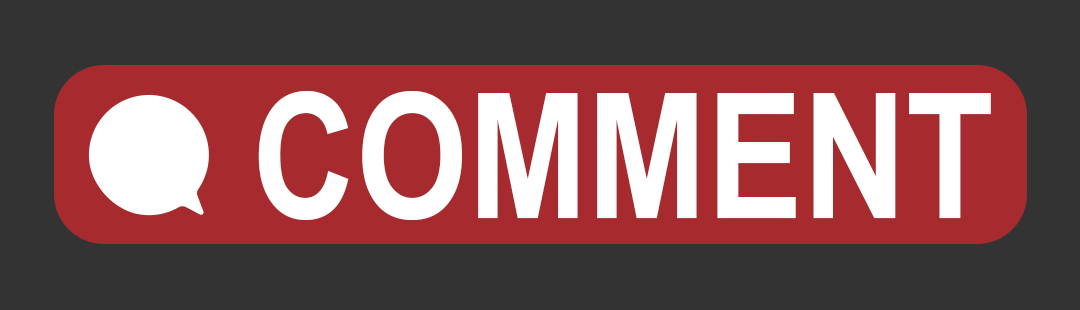
<style>
.page{position:relative;width:1080px;height:310px;background:#333333}
.page>*{position:absolute;margin:0}
.t1{font:175.2px "ArialNarrow-Bold";color:#ffffff;text-transform:uppercase}
</style>
<div class="page">
<p class="t1" style="left:258px;top:91px;width:733px;height:129px">comment</p>
</div>
